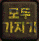
<style>
.page{position:relative;width:39px;height:41px}
.page>*{position:absolute;margin:0}
.t1{font:12px "HakgyoansimPosterB"}
</style>
<div class="page">
<p class="t1" style="left:2px;top:8px;width:34px;height:25px;text-align:center">모두<br>가지기</p>
</div>
